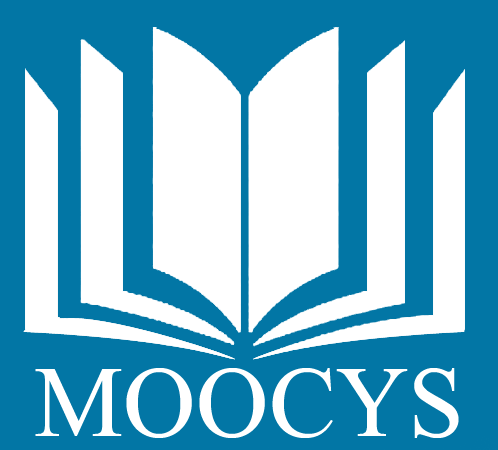
<style>
.page{position:relative;width:498px;height:450px;background:#0276a5}
.page>*{position:absolute;margin:0}
.t1{font:150px "Microsoft-Himalaya";color:#ffffff}
</style>
<div class="page">
<p class="t1" style="left:35px;top:368px;width:424px;height:70px">MOOCYS</p>
</div>
